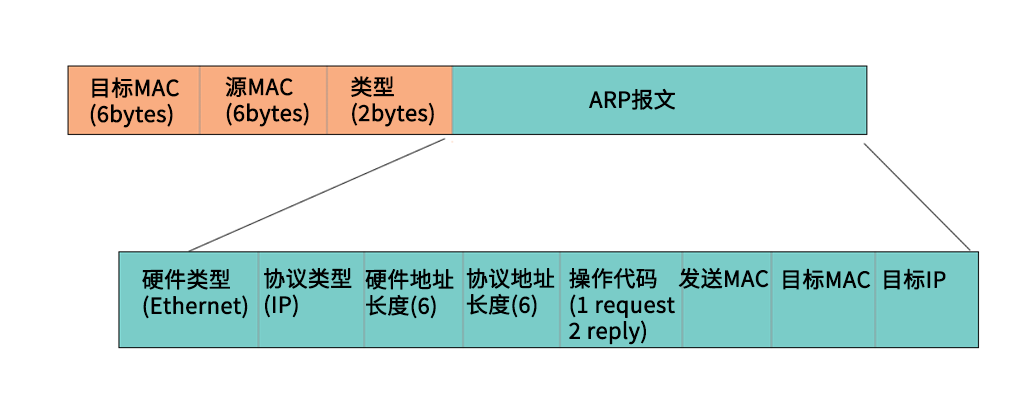
<style>
.page{position:relative;width:1024px;height:399px;background:#ffffff}
.page>*{position:absolute;margin:0}
.t1{font:21.7px "SourceHanSansCN-Normal";color:#000000;font-weight:bold}
</style>
<div class="page">
<p class="t1" style="left:90px;top:77px;width:89px;height:51px">目标MAC<br>(6bytes)</p>
<p class="t1" style="left:225px;top:76px;width:84px;height:51px">源MAC<br>(6bytes)</p>
<p class="t1" style="left:351px;top:76px;width:83px;height:51px">类型<br>(2bytes)</p>
<p class="t1" style="left:589px;top:88px;width:86px;height:22px">ARP报文</p>
<p class="t1" style="left:142px;top:269px;width:106px;height:50px">硬件类型<br>(Ethernet)</p>
<p class="t1" style="left:264px;top:268px;width:88px;height:50px">协议类型<br>(IP)</p>
<p class="t1" style="left:365px;top:268px;width:89px;height:51px">硬件地址<br>长度(6)</p>
<p class="t1" style="left:466px;top:268px;width:89px;height:50px">协议地址<br>长度(6)</p>
<p class="t1" style="left:569px;top:268px;width:106px;height:77px">操作代码<br>(1 request<br>2 reply)</p>
<p class="t1" style="left:678px;top:267px;width:91px;height:22px">发送MAC</p>
<p class="t1" style="left:783px;top:268px;width:88px;height:22px">目标MAC</p>
<p class="t1" style="left:884px;top:268px;width:62px;height:22px">目标IP</p>
</div>
